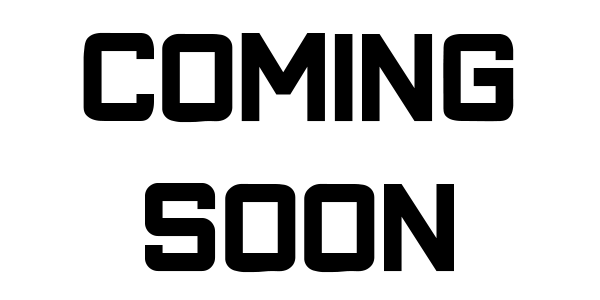
<style>
.page{position:relative;width:600px;height:300px;background:#ffffff}
.page>*{position:absolute;margin:0}
.t1{font:125px "Closeness-Regular";color:#000000}
</style>
<div class="page">
<p class="t1" style="left:83px;top:32px;width:431px;height:241px;text-align:center">COMING<br>SOON</p>
</div>
